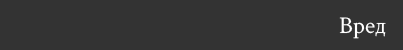
<style>
.page{position:relative;width:403px;height:50px;background:#333333}
.page>*{position:absolute;margin:0}
.t1{font:24px "CrimsonText-Regular";color:#ffffff}
</style>
<div class="page">
<p class="t1" style="left:339px;top:17px;width:47px;height:22px">Вред</p>
</div>
